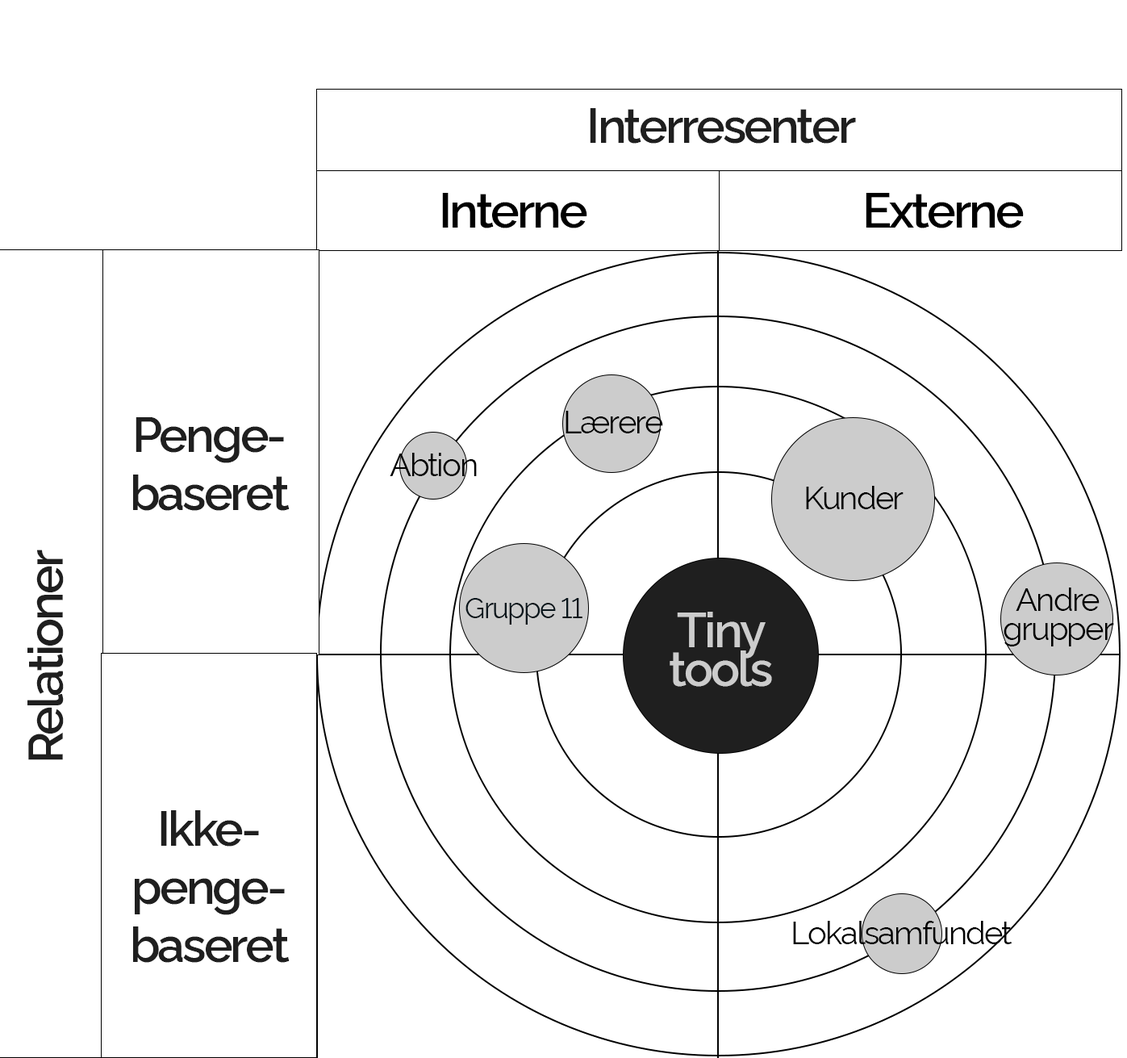
<style>
.page{position:relative;width:1127px;height:1058px;background:#ffffff}
.page>*{position:absolute;margin:0}
.t1{font:48.4px "Rawline-SemiBold";letter-spacing:-0.05em;color:#1f1f1f}
.t2{font:48.4px "Rawline-SemiBold";letter-spacing:-0.05em;color:#000000}
.t3{font:32.3px "Rawline-Regular";letter-spacing:-0.05em;color:#000000}
.t4{font:32.3px/29px "Rawline-Regular";letter-spacing:-0.05em;color:#000000}
.t5{font:28.2px "Rawline-Regular";letter-spacing:-0.05em;color:#0a161c}
.t6{font:48.4px "Rawline-SemiBold";letter-spacing:-0.05em;color:#cccccc}
</style>
<div class="page">
<p class="t1" style="left:590px;top:108px;width:266px;height:36px">Interresenter</p>
<p class="t2" style="left:442px;top:193px;width:145px;height:35px">Interne</p>
<p class="t2" style="left:866px;top:193px;width:158px;height:35px">Externe</p>
<p class="t3" style="left:566px;top:411px;width:97px;height:22px">Lærere</p>
<p class="t1" style="left:133px;top:417px;width:157px;height:94px;text-align:center">Penge-<br>baseret</p>
<p class="t3" style="left:390px;top:453px;width:87px;height:23px">Abtion</p>
<p class="t3" style="left:806px;top:486px;width:98px;height:23px">Kunder</p>
<p class="t1" style="left:27px;top:549px;width:37px;height:211px;rotate:-90deg">Relationer</p>
<p class="t4" style="left:1004px;top:587px;width:110px;height:59px;text-align:center">Andre grupper</p>
<p class="t5" style="left:466px;top:598px;width:117px;height:27px">Gruppe 11</p>
<p class="t6" style="left:670px;top:612px;width:102px;height:75px">Tiny tools</p>
<p class="t1" style="left:133px;top:810px;width:157px;height:153px;text-align:center">Ikke-<br>penge-<br>baseret</p>
<p class="t3" style="left:793px;top:921px;width:219px;height:23px">Lokalsamfundet</p>
</div>
